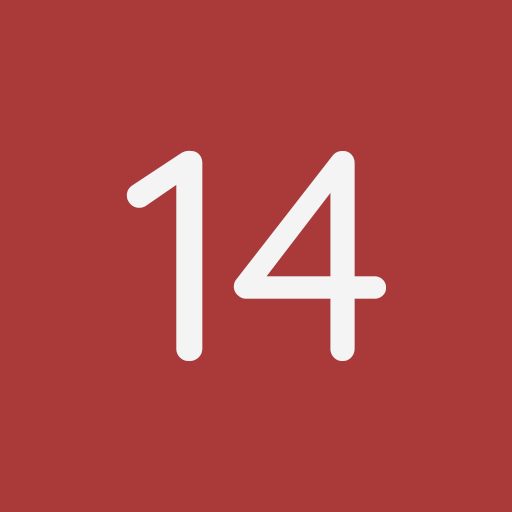
<style>
.page{position:relative;width:512px;height:512px;background:#aa3a3a}
.page>*{position:absolute;margin:0}
.t1{font:300px "Quicksand-Medium";color:#f4f4f4}
</style>
<div class="page">
<p class="t1" style="left:126px;top:150px;width:260px;height:211px">14</p>
</div>
